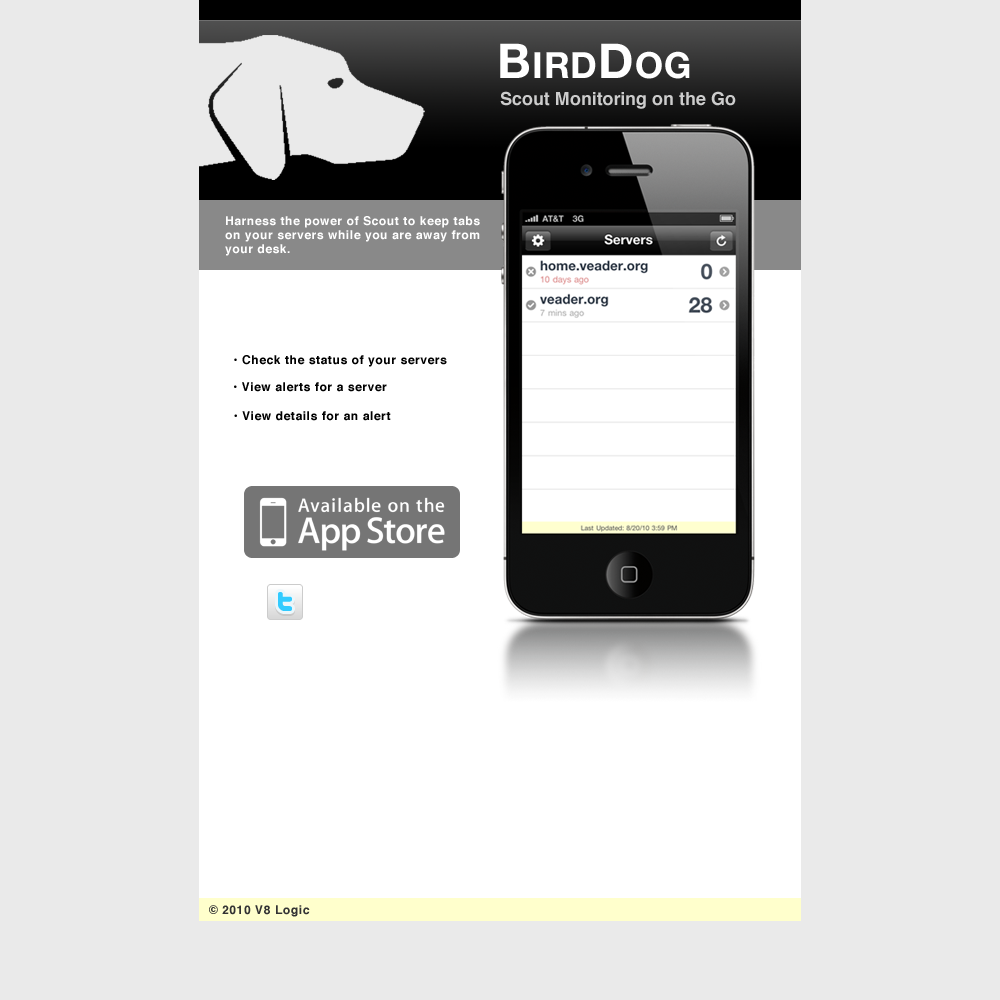
<style>
.page{position:relative;width:1000px;height:1000px;background:#eaeaea}
.page>*{position:absolute;margin:0}
.t1{font:36px "HelveticaNeue-Bold";letter-spacing:0.025em;color:#ffffff}
.t2{font:48px "HelveticaNeue-Bold";letter-spacing:0.025em;color:#ffffff}
.t3{font:18px "Helvetica-Bold";color:#cccccc}
.t4{font:12px/14px "Helvetica-Bold";letter-spacing:0.05em;color:#ffffff}
.t5{font:12px "Helvetica-Bold";letter-spacing:0.05em;color:#000000}
.t6{font:12px "Helvetica-Bold";letter-spacing:0.05em;color:#333333}
</style>
<div class="page">
<p class="t1" style="left:500px;top:43px;width:190px;height:36px"><span class="t2">B</span>IRD<span class="t2">D</span>OG</p>
<p class="t3" style="left:500px;top:91px;width:236px;height:18px">Scout Monitoring on the Go</p>
<p class="t4" style="left:225px;top:216px;width:255px;height:40px">Harness the power of Scout to keep tabs <br>on your servers while you are away from <br>your desk.</p>
<p class="t5" style="left:234px;top:355px;width:213px;height:12px">• Check the status of your servers</p>
<p class="t5" style="left:234px;top:382px;width:153px;height:10px">• View alerts for a server</p>
<p class="t5" style="left:234px;top:411px;width:157px;height:10px">• View details for an alert</p>
<p class="t6" style="left:209px;top:905px;width:101px;height:12px">© 2010 V8 Logic</p>
</div>
